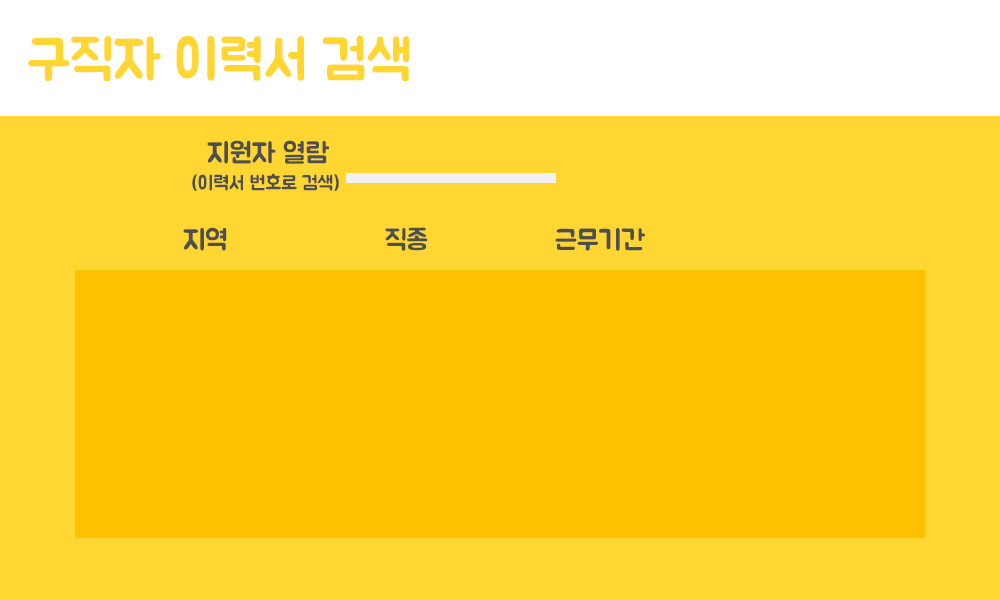
<style>
.page{position:relative;width:1000px;height:600px;background:#ffd632}
.page>*{position:absolute;margin:0}
.t1{font:55.6px "BMJUA";color:#ffd632}
.t2{font:27.8px "BMJUA";color:#4f4f4f}
.t3{font:19.4px "BMJUA";color:#4f4f4f}
</style>
<div class="page">
<p class="t1" style="left:28px;top:35px;width:381px;height:47px">구직자 이력서 검색</p>
<p class="t2" style="left:207px;top:140px;width:123px;height:24px">지원자 열람</p>
<p class="t3" style="left:192px;top:173px;width:147px;height:18px">(이력서 번호로 검색)</p>
<p class="t2" style="left:183px;top:227px;width:44px;height:24px">지역</p>
<p class="t2" style="left:385px;top:227px;width:43px;height:24px">직종</p>
<p class="t2" style="left:555px;top:228px;width:90px;height:23px">근무기간</p>
</div>
